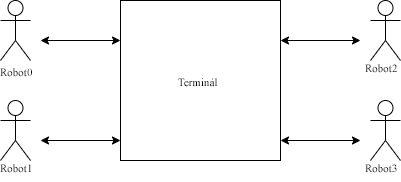
<style>
.page{position:relative;width:401px;height:182px;background:#ffffff}
.page>*{position:absolute;margin:0}
.t1{font:11px "TimesNewRomanPSMT"}
.t2{font:11px "TimesNewRomanPSMT";color:#000000}
</style>
<div class="page">
<p class="t1" style="left:365px;top:64px;width:32px;height:9px">Robot2</p>
<p class="t2" style="left:0px;top:68px;width:32px;height:9px">Robot0</p>
<p class="t2" style="left:178px;top:78px;width:40px;height:9px">Terminál</p>
<p class="t1" style="left:0px;top:164px;width:32px;height:9px">Robot1</p>
<p class="t1" style="left:365px;top:164px;width:32px;height:9px">Robot3</p>
</div>
